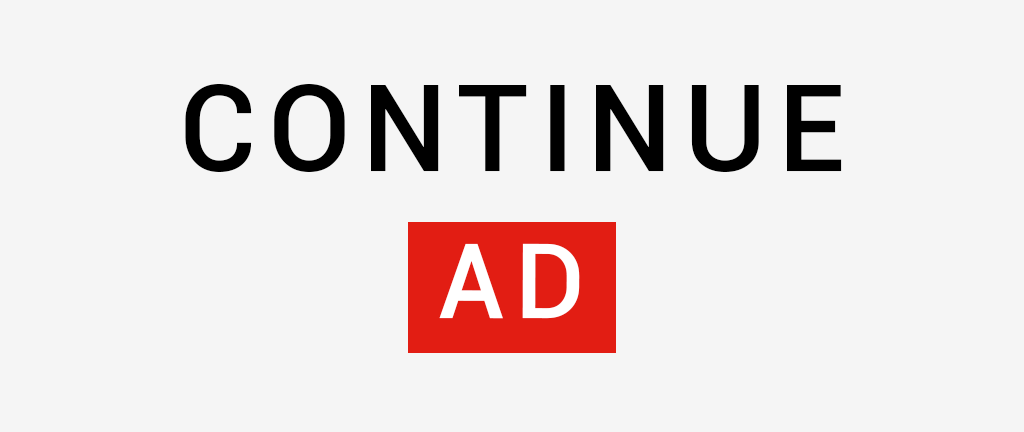
<style>
.page{position:relative;width:1024px;height:432px;background:#f5f5f5}
.page>*{position:absolute;margin:0}
.t1{font:120.5px "Roboto-Medium";letter-spacing:0.1em;color:#000000;text-transform:uppercase}
.t2{font:104.3px "Roboto-Medium";letter-spacing:0.1em;color:#ffffff}
</style>
<div class="page">
<p class="t1" style="left:185px;top:84px;width:657px;height:88px">CONTINUE</p>
<p class="t2" style="left:439px;top:243px;width:141px;height:76px">AD</p>
</div>
